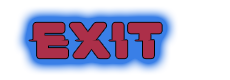
<style>
.page{position:relative;width:230px;height:80px;background:#ffffff}
.page>*{position:absolute;margin:0}
.t1{font:50px "BisectRegular";color:#ac2f49}
</style>
<div class="page">
<p class="t1" style="left:29px;top:22px;width:133px;height:37px">EXIT</p>
</div>
